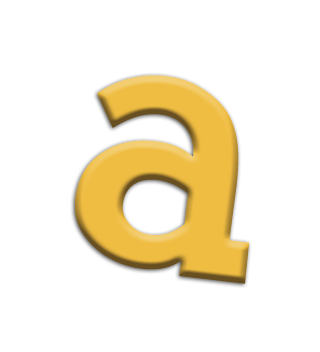
<style>
.page{position:relative;width:320px;height:352px;background:#ffffff}
.page>*{position:absolute;margin:0}
.t1{font:422px "FinkHeavy";color:#efbd42}
</style>
<div class="page">
<p class="t1" style="left:75px;top:75px;width:175px;height:209px;rotate:8deg">a</p>
</div>
